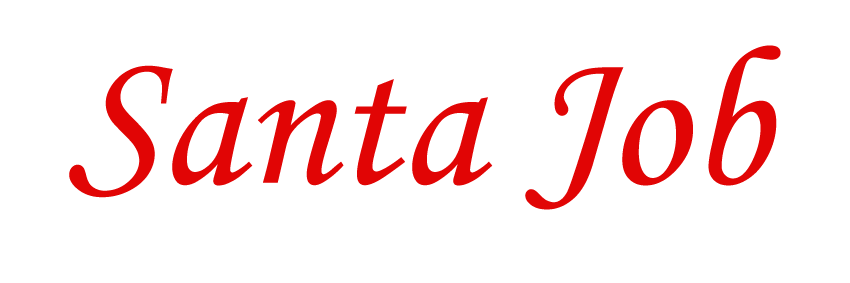
<style>
.page{position:relative;width:850px;height:283px;background:#ffffff}
.page>*{position:absolute;margin:0}
.t1{font:200px "MonotypeCorsiva";color:#e20505}
</style>
<div class="page">
<p class="t1" style="left:69px;top:45px;width:712px;height:165px">Santa Job</p>
</div>
